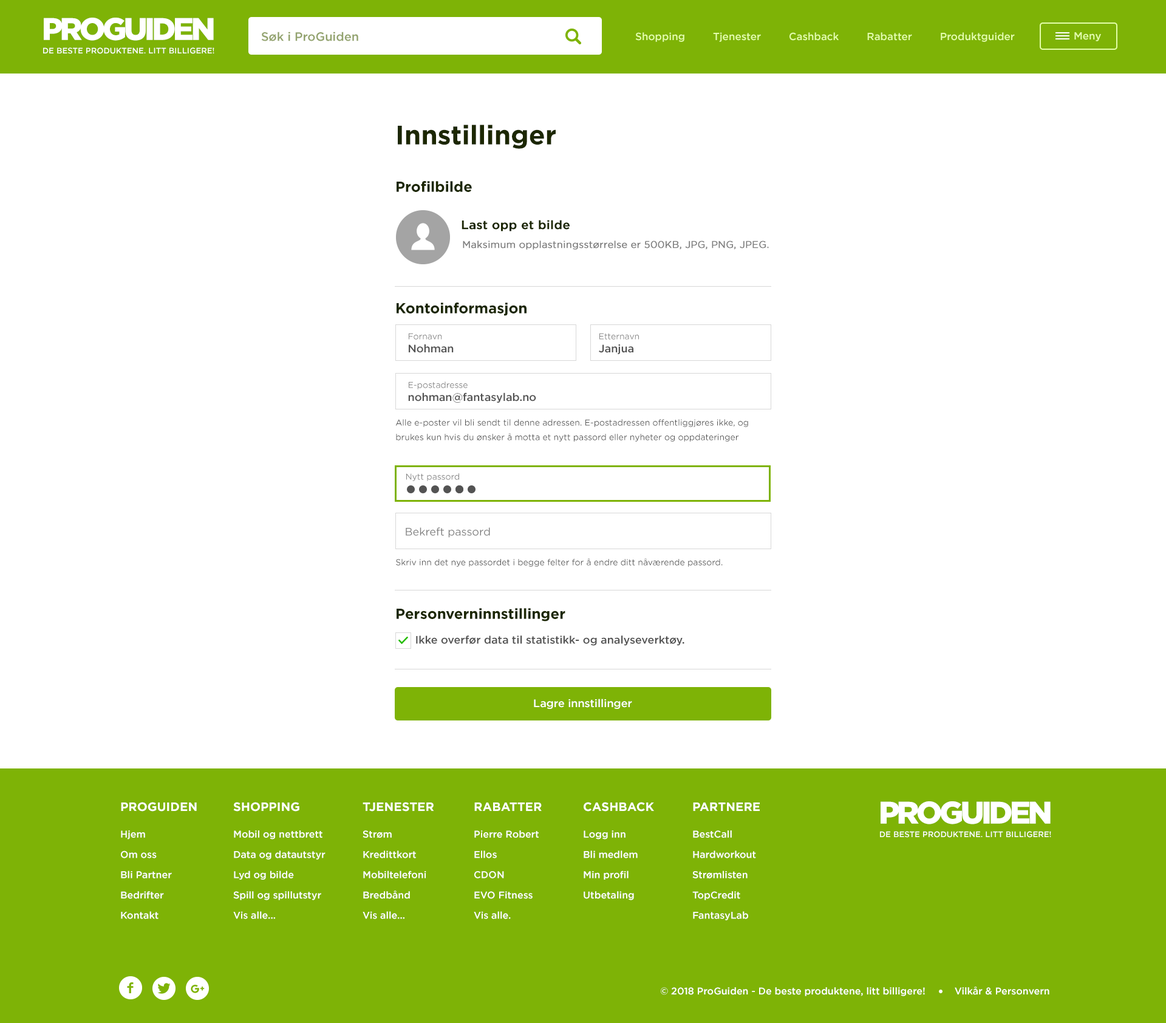
<style>
.page{position:relative;width:1166px;height:1023px;background:#ffffff}
.page>*{position:absolute;margin:0}
.t1{font:8px/13.5px "Gotham-Medium";color:#ffffff}
.t2{font:31.2px/51.7px "Gotham-Black";letter-spacing:-0.09em;color:#ffffff}
.t3{font:12.1px "Gotham-Medium";color:#93a36e}
.t4{font:10.3px "Gotham-Medium";color:#e4feaa}
.t5{font:26.7px "Gotham-Bold";color:#1c2702}
.t6{font:14.6px "Gotham-Bold";color:#1c2702}
.t7{font:12.1px "Gotham-Medium";color:#1c2702;font-weight:bold}
.t8{font:9.7px "Gotham-Book";color:#7f7f7f;font-weight:bold}
.t9{font:8.5px "Gotham-Book";color:#828282}
.t10{font:10.9px "Gotham-Medium";color:#535353}
.t11{font:8.5px/14.6px "Gotham-Book";color:#535353}
.t12{font:10.9px "Gotham-Book";color:#818181}
.t13{font:8.5px "Gotham-Book";color:#535353}
.t14{font:10.9px "Gotham-Medium";color:#ffffff}
.t15{font:9.7px/20.3px "Gotham-Medium";color:#ffffff}
.t16{font:12.1px/6.3px "Gotham-Bold";color:#ffffff}
.t17{font:9.7px "Gotham-Medium";color:#ffffff}
</style>
<div class="page">
<p class="t1" style="left:43px;top:18px;width:171px;height:36px;text-align:center"><span class="t2">PROGUIDEN<br></span>DE BESTE PRODUKTENE. LITT BILLIGERE!</p>
<p class="t3" style="left:261px;top:32px;width:97px;height:9px">Søk i ProGuiden</p>
<p class="t4" style="left:635px;top:32px;width:380px;height:10px">Shopping         Tjenester         Cashback         Rabatter         Produktguider</p>
<p class="t4" style="left:1074px;top:32px;width:27px;height:9px">Meny</p>
<p class="t5" style="left:398px;top:124px;width:158px;height:25px">Innstillinger</p>
<p class="t6" style="left:397px;top:181px;width:75px;height:11px">Profilbilde</p>
<p class="t7" style="left:462px;top:220px;width:108px;height:11px">Last opp et bilde</p>
<p class="t8" style="left:463px;top:240px;width:306px;height:10px">Maksimum opplastningsstørrelse er 500KB, JPG, PNG, JPEG.</p>
<p class="t6" style="left:397px;top:302px;width:130px;height:14px">Kontoinformasjon</p>
<p class="t9" style="left:409px;top:333px;width:45px;height:20px">Fornavn<br><span class="t10">Nohman</span></p>
<p class="t9" style="left:599px;top:333px;width:40px;height:21px">Etternavn<br><span class="t10">Janjua</span></p>
<p class="t10" style="left:408px;top:381px;width:128px;height:22px"><span class="t9">E-postadresse<br></span>nohman@fantasylab.no</p>
<p class="t11" style="left:395px;top:419px;width:353px;height:22px">Alle e-poster vil bli sendt til denne adressen. E-postadressen offentliggjøres ikke, og <br>brukes kun hvis du ønsker å motta et nytt passord eller nyheter og oppdateringer</p>
<p class="t9" style="left:406px;top:473px;width:53px;height:8px">Nytt passord</p>
<p class="t12" style="left:406px;top:527px;width:84px;height:10px">Bekreft passord</p>
<p class="t13" style="left:396px;top:558px;width:327px;height:9px">Skriv inn det nye passordet i begge felter for å endre ditt nåværende passord.</p>
<p class="t6" style="left:397px;top:608px;width:168px;height:13px">Personverninnstillinger</p>
<p class="t10" style="left:416px;top:635px;width:268px;height:11px">Ikke overfør data til statistikk- og analyseverktøy.</p>
<p class="t14" style="left:534px;top:698px;width:98px;height:11px">Lagre innstillinger</p>
<p class="t15" style="left:121px;top:802px;width:76px;height:117px"><span class="t16">PROGUIDEN<br><br></span>Hjem<br>Om oss<br>Bli Partner<br>Bedrifter<br>Kontakt</p>
<p class="t15" style="left:233px;top:802px;width:93px;height:117px"><span class="t16">SHOPPING<br><br></span>Mobil og nettbrett<br>Data og datautstyr<br>Lyd og bilde<br>Spill og spillutstyr<br>Vis alle...</p>
<p class="t15" style="left:363px;top:802px;width:71px;height:117px"><span class="t16">TJENESTER<br><br></span>Strøm<br>Kredittkort<br>Mobiltelefoni<br>Bredbånd <br>Vis alle...</p>
<p class="t15" style="left:474px;top:802px;width:68px;height:117px"><span class="t16">RABATTER<br><br></span>Pierre Robert<br>Ellos<br>CDON<br>EVO Fitness<br>Vis alle.</p>
<p class="t15" style="left:584px;top:802px;width:70px;height:98px"><span class="t16">CASHBACK <br><br></span>Logg inn<br>Bli medlem<br>Min profil<br>Utbetaling</p>
<p class="t15" style="left:692px;top:802px;width:68px;height:118px"><span class="t16">PARTNERE<br><br></span>BestCall<br>Hardworkout<br>Strømlisten<br>TopCredit<br>FantasyLab</p>
<p class="t1" style="left:880px;top:801px;width:171px;height:36px;text-align:center"><span class="t2">PROGUIDEN<br></span>DE BESTE PRODUKTENE. LITT BILLIGERE!</p>
<p class="t17" style="left:661px;top:986px;width:388px;height:10px">© 2018 ProGuiden - De beste produktene, litt billigere!          Vilkår &amp; Personvern</p>
</div>
